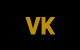
<style>
.page{position:relative;width:80px;height:50px;background:#000000}
.page>*{position:absolute;margin:0}
.t1{font:24px "Roboto-Bold";color:#bf8f00;text-transform:uppercase;font-weight:bold;scale:0.9 1}
</style>
<div class="page">
<p class="t1" style="left:25px;top:17px;width:30px;height:18px">VK</p>
</div>
